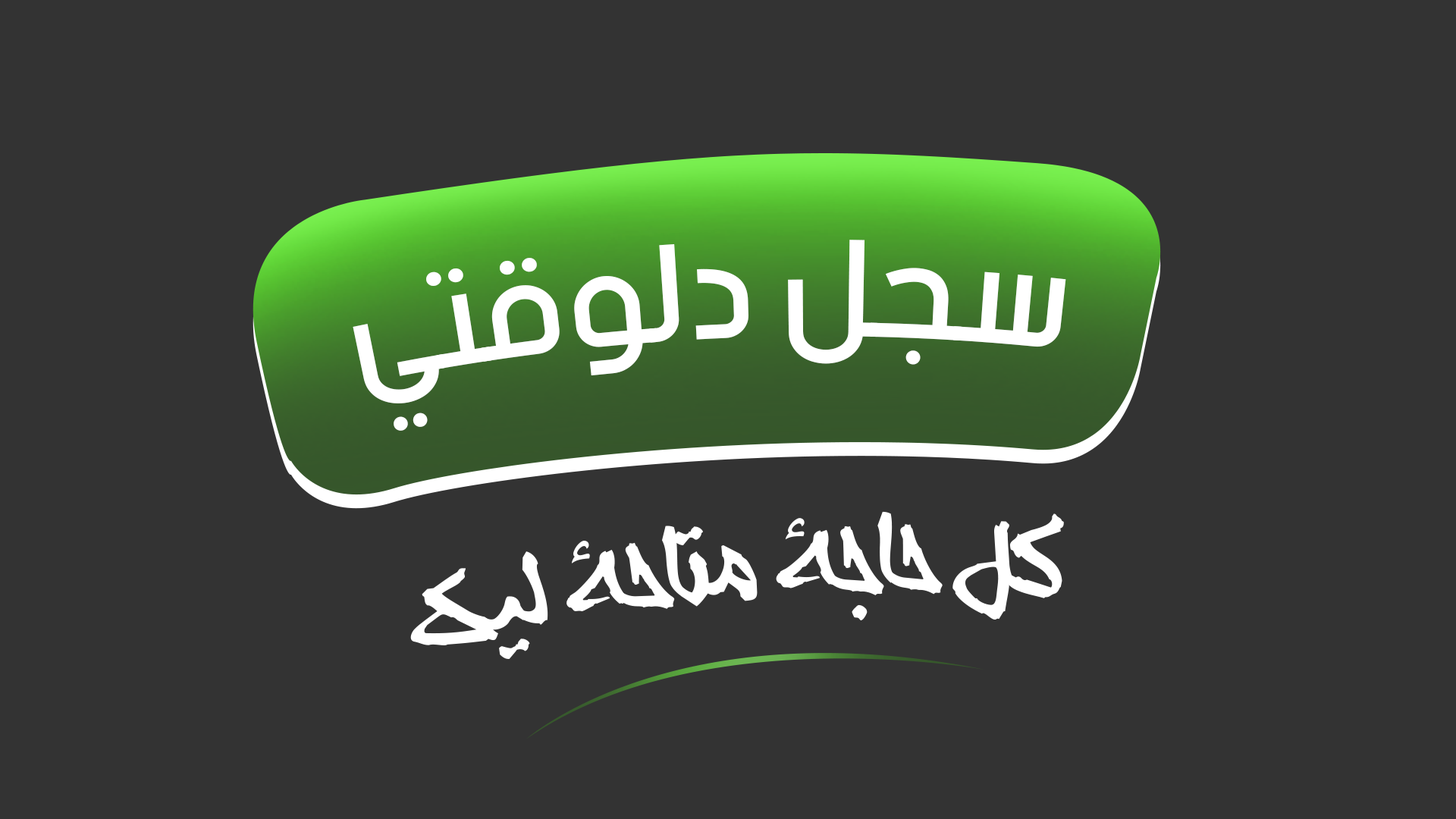
<style>
.page{position:relative;width:1456px;height:819px;background:#333333}
.page>*{position:absolute;margin:0}
.t1{font:146.8px "beINNormal";color:#ffffff;text-transform:uppercase}
.t2{font:110.9px "AFSANEH";color:#ffffff;text-transform:uppercase}
</style>
<div class="page">
<p class="t1" style="left:353px;top:240px;width:713px;height:191px;rotate:-3deg">سجل دلوقتي</p>
<p class="t2" style="left:410px;top:511px;width:654px;height:148px;rotate:-5deg">كل حاجة متاحة ليك</p>
</div>
